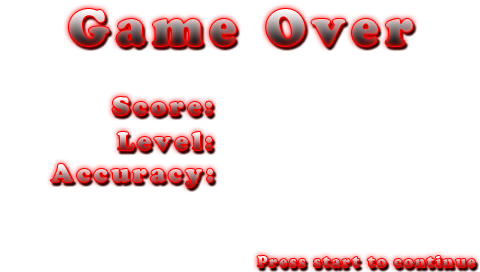
<style>
.page{position:relative;width:480px;height:272px;background:#ffffff}
.page>*{position:absolute;margin:0}
.t1{font:50px "CooperBlackStd";letter-spacing:0.125em}
.t2{font:25.6px "CooperBlackStd";letter-spacing:0.125em}
.t3{font:15px "CooperBlackStd";letter-spacing:0.125em;scale:0.97 1}
</style>
<div class="page">
<p class="t1" style="left:69px;top:9px;width:344px;height:37px">Game Over</p>
<p class="t2" style="left:112px;top:97px;width:100px;height:18px">Score:</p>
<p class="t3" style="left:257px;top:256px;width:218px;height:11px">Press start to continue</p>
</div>
